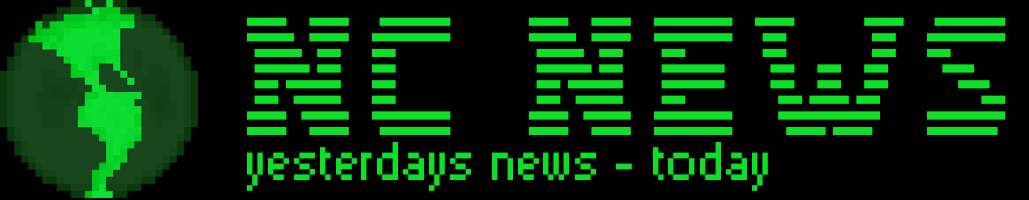
<style>
.page{position:relative;width:1029px;height:200px;background:#000000}
.page>*{position:absolute;margin:0}
.t1{font:125px "IBM-Logo";color:#0ee027}
.t2{font:41.7px "PixelSix01";color:#0ee027}
</style>
<div class="page">
<p class="t1" style="left:247px;top:17px;width:759px;height:118px">NC News</p>
<p class="t2" style="left:247px;top:142px;width:521px;height:49px">Yesterdays news - todaY</p>
</div>
